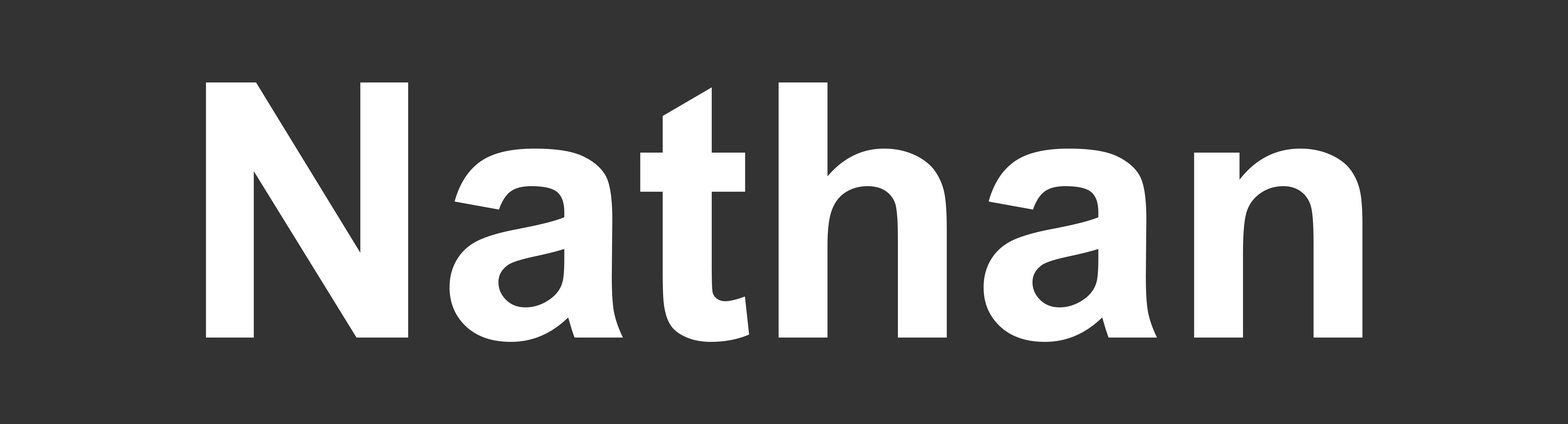
<style>
.page{position:relative;width:1568px;height:424px;background:#333333}
.page>*{position:absolute;margin:0}
.t1{font:356.1px "Arial-BoldMT";color:#ffffff}
</style>
<div class="page">
<p class="t1" style="left:206px;top:82px;width:1157px;height:260px">Nathan</p>
</div>
